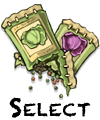
<style>
.page{position:relative;width:100px;height:120px;background:#ffffff}
.page>*{position:absolute;margin:0}
.t1{font:24px "Chalkduster";letter-spacing:0.05em;color:#000000;font-variant:small-caps;font-weight:bold}
</style>
<div class="page">
<p class="t1" style="left:9px;top:97px;width:82px;height:21px">Select</p>
</div>
